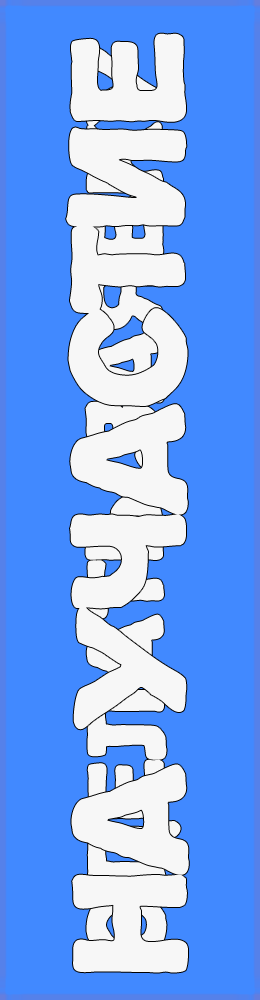
<style>
.page{position:relative;width:260px;height:1000px;background:#4189ff}
.page>*{position:absolute;margin:0}
.t1{font:142.6px "Propaganda";letter-spacing:-0.06em;color:#f7f7f7}
.t2{font:96.1px "Propaganda";letter-spacing:-0.06em;color:#f7f7f7}
</style>
<div class="page">
<p class="t1" style="left:66px;top:33px;width:123px;height:940px;rotate:-90deg">на участие</p>
<p class="t2" style="left:85px;top:44px;width:96px;height:917px;rotate:-90deg">сделать заявку</p>
</div>
